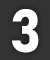
<style>
.page{position:relative;width:50px;height:60px;background:#333333}
.page>*{position:absolute;margin:0}
.t1{font:60px "Bahnschrift-Bold";color:#ffffff}
</style>
<div class="page">
<p class="t1" style="left:12px;top:9px;width:27px;height:44px">3</p>
</div>
